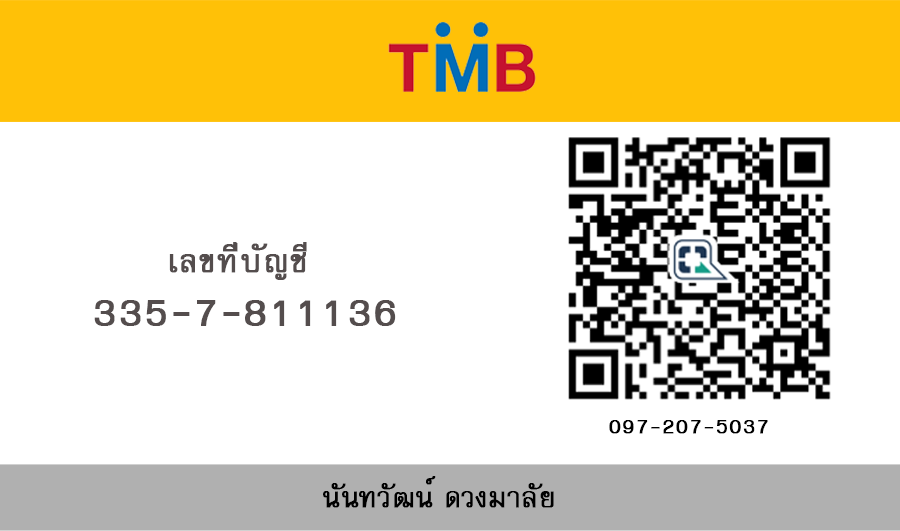
<style>
.page{position:relative;width:900px;height:531px;background:#ffffff}
.page>*{position:absolute;margin:0}
.t1{font:45.1px "FreesiaUPC";color:#544d4d;font-weight:bold}
.t2{font:55.3px "FreesiaUPC";color:#544d4d;font-weight:bold}
.t3{font:29.2px "FreesiaUPC";color:#000000;font-weight:bold}
.t4{font:39.1px "DSNPreeCha";color:#000000;font-weight:bold}
</style>
<div class="page">
<p class="t1" style="left:169px;top:242px;width:138px;height:38px">เลขที่บัญชี</p>
<p class="t2" style="left:94px;top:300px;width:302px;height:26px">335-7-811136</p>
<p class="t3" style="left:609px;top:420px;width:159px;height:14px">097-207-5037</p>
<p class="t4" style="left:323px;top:476px;width:231px;height:32px">นันทวัฒน์ ดวงมาลัย</p>
</div>
